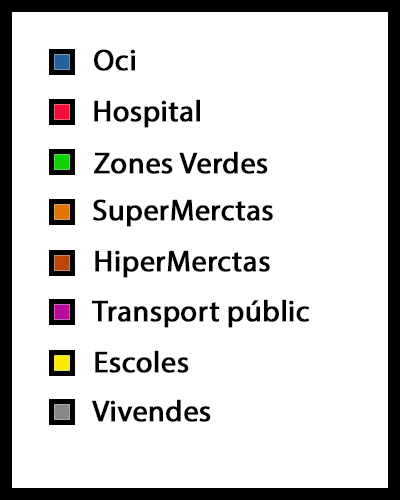
<style>
.page{position:relative;width:400px;height:500px;background:#ffffff}
.page>*{position:absolute;margin:0}
.t1{font:30px "MyriadPro-Regular";color:#000000;font-weight:bold}
</style>
<div class="page">
<p class="t1" style="left:94px;top:49px;width:41px;height:22px">Oci</p>
<p class="t1" style="left:94px;top:99px;width:106px;height:29px">Hospital</p>
<p class="t1" style="left:94px;top:151px;width:174px;height:23px">Zones Verdes</p>
<p class="t1" style="left:93px;top:199px;width:180px;height:28px">SuperMerctas</p>
<p class="t1" style="left:95px;top:250px;width:175px;height:28px">HiperMerctas</p>
<p class="t1" style="left:92px;top:299px;width:217px;height:29px">Transport públic</p>
<p class="t1" style="left:95px;top:350px;width:94px;height:23px">Escoles</p>
<p class="t1" style="left:92px;top:399px;width:119px;height:23px">Vivendes</p>
</div>
